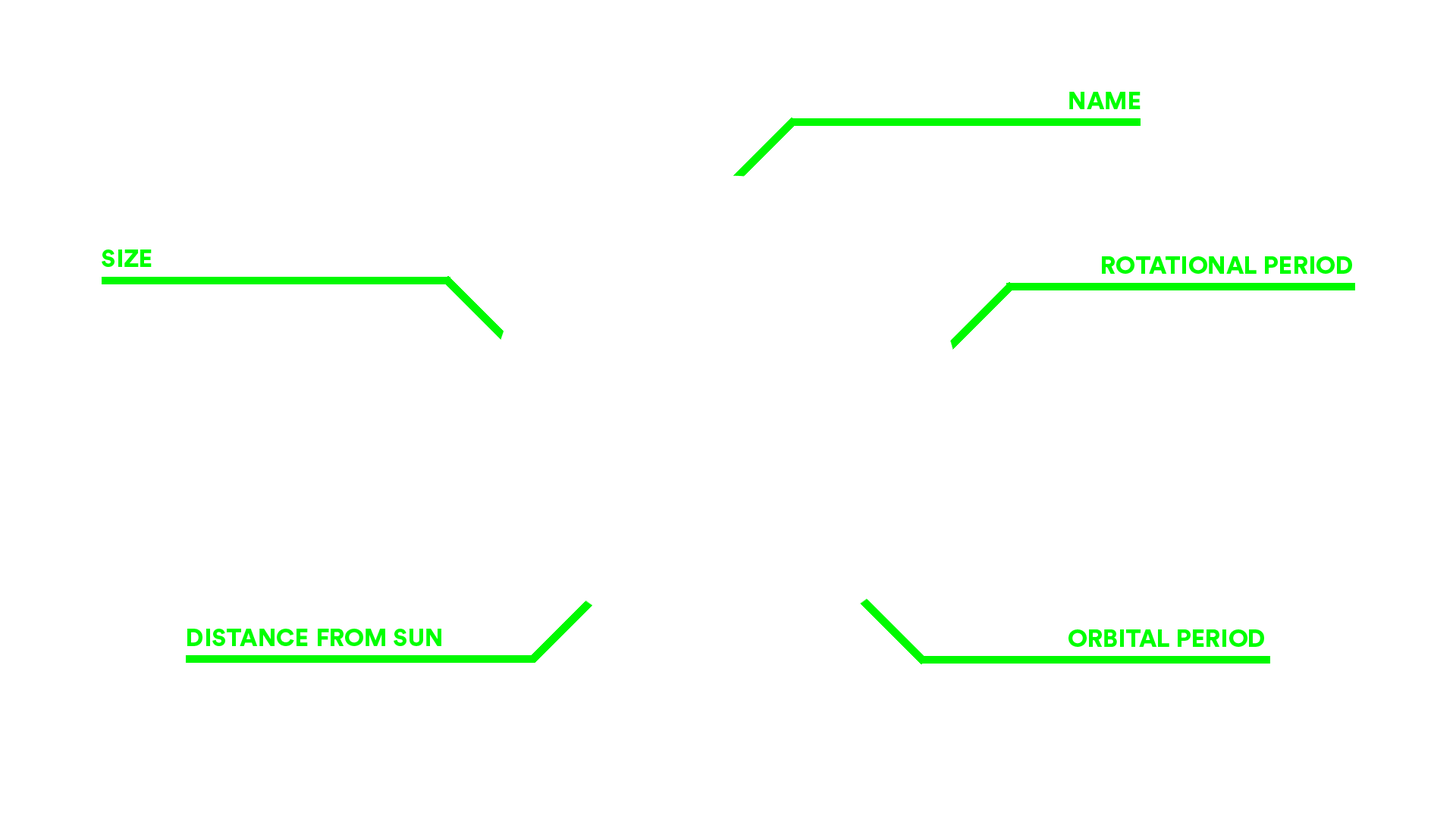
<style>
.page{position:relative;width:1456px;height:819px;background:#ffffff}
.page>*{position:absolute;margin:0}
.t1{font:24.3px "CircularStd-Black";color:#00ff00}
</style>
<div class="page">
<p class="t1" style="left:1069px;top:92px;width:72px;height:17px">NAME</p>
<p class="t1" style="left:102px;top:249px;width:50px;height:18px">SIZE</p>
<p class="t1" style="left:1102px;top:256px;width:250px;height:18px">ROTATIONAL PERIOD</p>
<p class="t1" style="left:187px;top:629px;width:254px;height:17px">DISTANCE FROM SUN</p>
<p class="t1" style="left:1068px;top:629px;width:196px;height:18px">ORBITAL PERIOD</p>
</div>
